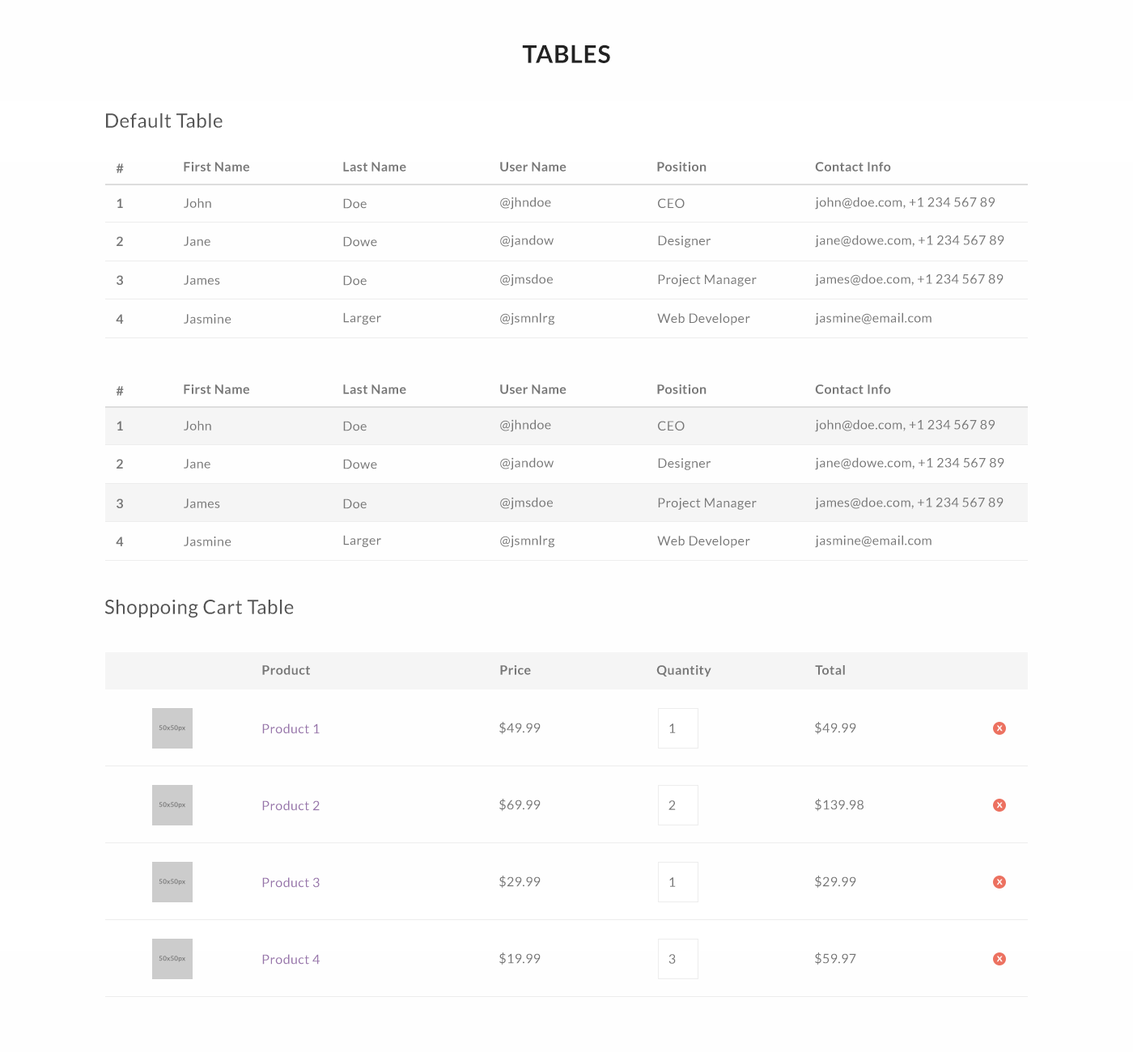
<style>
.page{position:relative;width:1133px;height:1052px;background:#fefefe}
.page>*{position:absolute;margin:0}
.t1{font:24.3px "Lato-Bold";letter-spacing:0.025em;color:#222222}
.t2{font:19.4px "Lato-Regular";letter-spacing:0.025em;color:#555555}
.t3{font:13px "Lato-Bold";letter-spacing:0.025em;color:#777777}
.t4{font:13px "Lato-Regular";letter-spacing:0.025em;color:#777777}
.t5{font:13px "Lato-Regular";letter-spacing:0.025em;color:#9875ab}
</style>
<div class="page">
<p class="t1" style="left:522px;top:45px;width:88px;height:18px">TABLES</p>
<p class="t2" style="left:106px;top:113px;width:117px;height:15px">Default Table</p>
<p class="t3" style="left:184px;top:162px;width:65px;height:10px">First Name</p>
<p class="t3" style="left:343px;top:162px;width:63px;height:10px">Last Name</p>
<p class="t3" style="left:500px;top:162px;width:67px;height:10px">User Name</p>
<p class="t3" style="left:657px;top:162px;width:50px;height:10px">Position</p>
<p class="t3" style="left:815px;top:162px;width:76px;height:10px">Contact Info</p>
<p class="t3" style="left:116px;top:164px;width:8px;height:9px">#</p>
<p class="t4" style="left:500px;top:197px;width:51px;height:13px">@jhndoe</p>
<p class="t4" style="left:815px;top:197px;width:180px;height:13px">john@doe.com, +1 234 567 89</p>
<p class="t3" style="left:117px;top:198px;width:6px;height:10px">1</p>
<p class="t4" style="left:184px;top:198px;width:27px;height:10px">John</p>
<p class="t4" style="left:343px;top:198px;width:24px;height:11px">Doe</p>
<p class="t4" style="left:658px;top:198px;width:27px;height:10px">CEO</p>
<p class="t3" style="left:117px;top:236px;width:6px;height:10px">2</p>
<p class="t4" style="left:184px;top:236px;width:26px;height:10px">Jane</p>
<p class="t4" style="left:343px;top:236px;width:34px;height:11px">Dowe</p>
<p class="t4" style="left:500px;top:235px;width:54px;height:13px">@jandow</p>
<p class="t4" style="left:658px;top:236px;width:53px;height:12px">Designer</p>
<p class="t4" style="left:815px;top:235px;width:190px;height:13px">jane@dowe.com, +1 234 567 89</p>
<p class="t3" style="left:117px;top:275px;width:6px;height:10px">3</p>
<p class="t4" style="left:184px;top:275px;width:36px;height:10px">James</p>
<p class="t4" style="left:343px;top:275px;width:24px;height:11px">Doe</p>
<p class="t4" style="left:500px;top:274px;width:53px;height:13px">@jmsdoe</p>
<p class="t4" style="left:658px;top:274px;width:99px;height:13px">Project Manager</p>
<p class="t4" style="left:815px;top:274px;width:189px;height:13px">james@doe.com, +1 234 567 89</p>
<p class="t3" style="left:116px;top:314px;width:8px;height:10px">4</p>
<p class="t4" style="left:184px;top:314px;width:47px;height:10px">Jasmine</p>
<p class="t4" style="left:343px;top:312px;width:38px;height:13px">Larger</p>
<p class="t4" style="left:500px;top:312px;width:55px;height:13px">@jsmnlrg</p>
<p class="t4" style="left:657px;top:313px;width:93px;height:12px">Web Developer</p>
<p class="t4" style="left:815px;top:312px;width:117px;height:13px">jasmine@email.com</p>
<p class="t3" style="left:116px;top:386px;width:8px;height:10px">#</p>
<p class="t3" style="left:184px;top:384px;width:65px;height:10px">First Name</p>
<p class="t3" style="left:343px;top:384px;width:63px;height:10px">Last Name</p>
<p class="t3" style="left:500px;top:384px;width:67px;height:10px">User Name</p>
<p class="t3" style="left:657px;top:384px;width:50px;height:10px">Position</p>
<p class="t3" style="left:815px;top:384px;width:76px;height:10px">Contact Info</p>
<p class="t3" style="left:117px;top:421px;width:6px;height:10px">1</p>
<p class="t4" style="left:184px;top:421px;width:27px;height:10px">John</p>
<p class="t4" style="left:343px;top:421px;width:24px;height:10px">Doe</p>
<p class="t4" style="left:500px;top:419px;width:51px;height:13px">@jhndoe</p>
<p class="t4" style="left:658px;top:421px;width:27px;height:10px">CEO</p>
<p class="t4" style="left:815px;top:419px;width:180px;height:13px">john@doe.com, +1 234 567 89</p>
<p class="t3" style="left:117px;top:459px;width:6px;height:10px">2</p>
<p class="t4" style="left:184px;top:459px;width:26px;height:10px">Jane</p>
<p class="t4" style="left:343px;top:459px;width:34px;height:10px">Dowe</p>
<p class="t4" style="left:500px;top:457px;width:54px;height:13px">@jandow</p>
<p class="t4" style="left:658px;top:458px;width:53px;height:12px">Designer</p>
<p class="t4" style="left:815px;top:457px;width:190px;height:13px">jane@dowe.com, +1 234 567 89</p>
<p class="t4" style="left:500px;top:497px;width:53px;height:13px">@jmsdoe</p>
<p class="t4" style="left:658px;top:498px;width:99px;height:12px">Project Manager</p>
<p class="t4" style="left:815px;top:497px;width:189px;height:13px">james@doe.com, +1 234 567 89</p>
<p class="t3" style="left:117px;top:499px;width:6px;height:9px">3</p>
<p class="t4" style="left:184px;top:499px;width:36px;height:9px">James</p>
<p class="t4" style="left:343px;top:499px;width:24px;height:10px">Doe</p>
<p class="t3" style="left:116px;top:537px;width:8px;height:9px">4</p>
<p class="t4" style="left:184px;top:537px;width:47px;height:9px">Jasmine</p>
<p class="t4" style="left:343px;top:535px;width:38px;height:12px">Larger</p>
<p class="t4" style="left:500px;top:535px;width:55px;height:13px">@jsmnlrg</p>
<p class="t4" style="left:657px;top:536px;width:93px;height:12px">Web Developer</p>
<p class="t4" style="left:815px;top:535px;width:117px;height:13px">jasmine@email.com</p>
<p class="t2" style="left:104px;top:600px;width:190px;height:18px">Shoppoing Cart Table</p>
<p class="t3" style="left:262px;top:665px;width:48px;height:10px">Product</p>
<p class="t3" style="left:500px;top:665px;width:31px;height:10px">Price</p>
<p class="t3" style="left:656px;top:665px;width:55px;height:12px">Quantity</p>
<p class="t3" style="left:815px;top:665px;width:30px;height:10px">Total</p>
<p class="t5" style="left:262px;top:724px;width:58px;height:10px">Product 1</p>
<p class="t4" style="left:499px;top:722px;width:42px;height:13px">$49.99</p>
<p class="t4" style="left:669px;top:724px;width:7px;height:9px">1</p>
<p class="t4" style="left:815px;top:722px;width:41px;height:13px">$49.99</p>
<p class="t5" style="left:262px;top:801px;width:58px;height:10px">Product 2</p>
<p class="t4" style="left:499px;top:799px;width:42px;height:13px">$69.99</p>
<p class="t4" style="left:669px;top:801px;width:7px;height:9px">2</p>
<p class="t4" style="left:815px;top:799px;width:49px;height:13px">$139.98</p>
<p class="t5" style="left:262px;top:877px;width:58px;height:11px">Product 3</p>
<p class="t4" style="left:499px;top:876px;width:42px;height:13px">$29.99</p>
<p class="t4" style="left:669px;top:877px;width:7px;height:10px">1</p>
<p class="t4" style="left:815px;top:876px;width:41px;height:13px">$29.99</p>
<p class="t4" style="left:499px;top:953px;width:42px;height:13px">$19.99</p>
<p class="t4" style="left:815px;top:953px;width:41px;height:13px">$59.97</p>
<p class="t5" style="left:262px;top:954px;width:58px;height:11px">Product 4</p>
<p class="t4" style="left:669px;top:954px;width:7px;height:10px">3</p>
</div>
